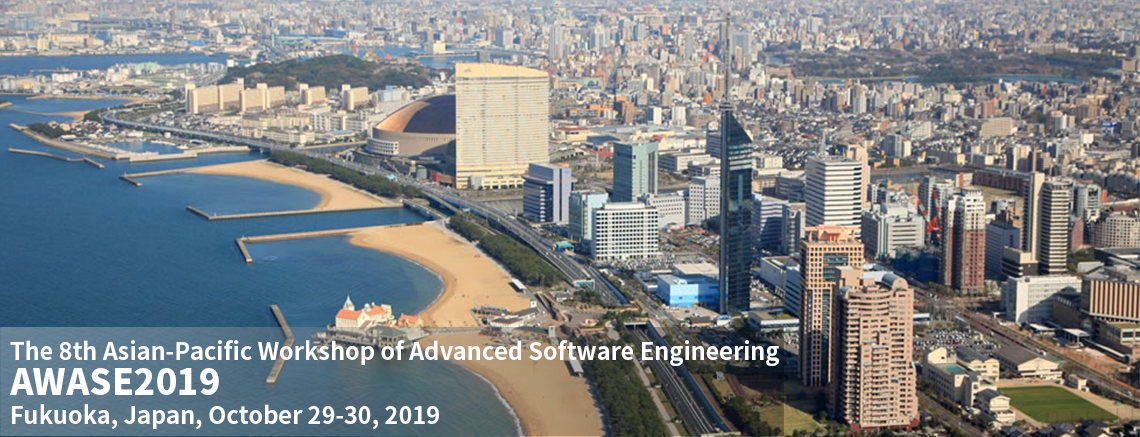
<style>
.page{position:relative;width:1140px;height:437px}
.page>*{position:absolute;margin:0}
.t1{font:24px/24px "SourceHanSans-Bold";color:#ffffff}
.t2{font:36px/40px "SourceHanSans-Heavy";color:#ffffff}
.t3{font:24px/40px "SourceHanSans-Bold";color:#ffffff}
</style>
<div class="page">
<p class="t1" style="left:10px;top:340px;width:769px;height:90px">The 8th Asian-Pacific Workshop of Advanced Software Engineering<br><span class="t2">AWASE2019<br></span><span class="t3">Fukuoka, Japan, October 29-30, 2019</span></p>
</div>
